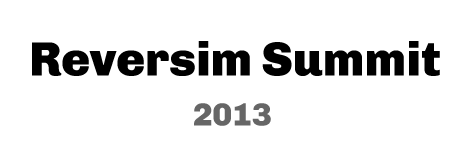
<style>
.page{position:relative;width:471px;height:157px;background:#ffffff}
.page>*{position:absolute;margin:0}
.t1{font:48px "Chivo-Black";color:#000000}
.t2{font:32px "Chivo-Black";color:#666666}
</style>
<div class="page">
<p class="t1" style="left:32px;top:41px;width:408px;height:35px">Reversim Summit</p>
<p class="t2" style="left:194px;top:103px;width:77px;height:23px">2013</p>
</div>
